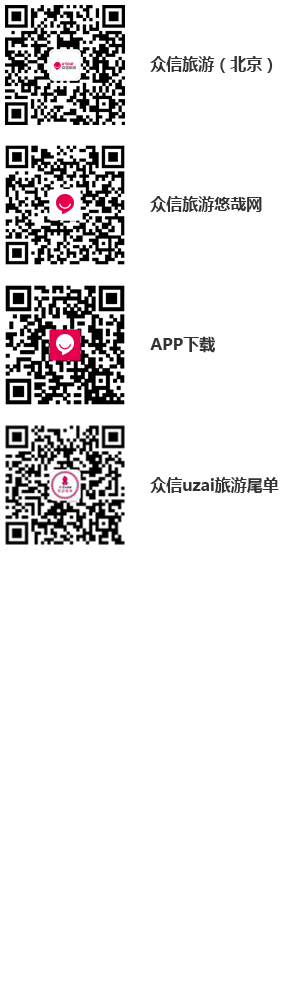
<style>
.page{position:relative;width:300px;height:1000px;background:#ffffff}
.page>*{position:absolute;margin:0}
.t1{font:16px "MicrosoftYaHei-Bold";color:#333333}
</style>
<div class="page">
<p class="t1" style="left:150px;top:56px;width:123px;height:17px">众信旅游（北京）</p>
<p class="t1" style="left:150px;top:196px;width:112px;height:16px">众信旅游悠哉网</p>
<p class="t1" style="left:150px;top:336px;width:65px;height:17px">APP下载</p>
<p class="t1" style="left:150px;top:477px;width:129px;height:16px">众信uzai旅游尾单</p>
</div>
